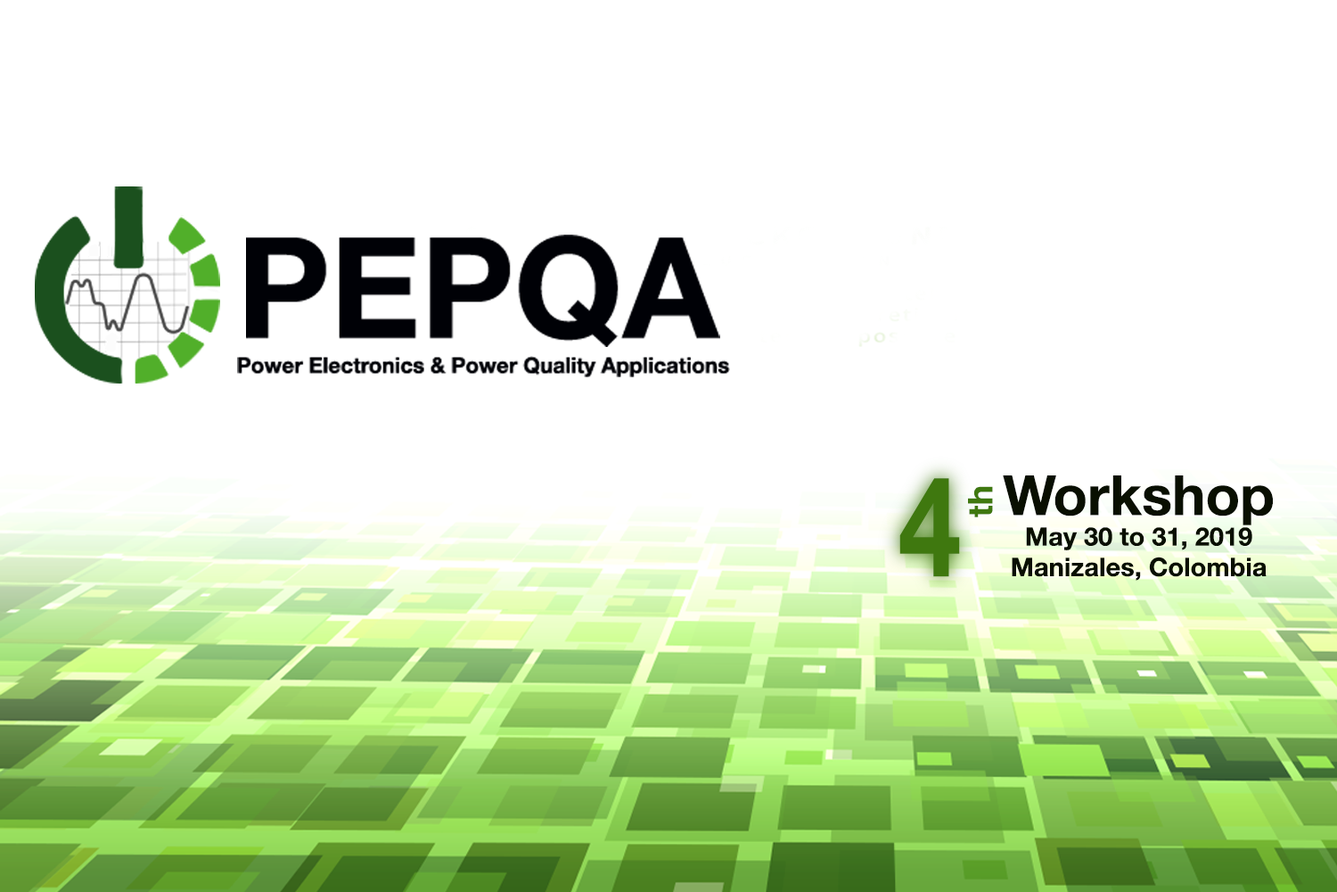
<style>
.page{position:relative;width:1337px;height:892px;background:#ffffff}
.page>*{position:absolute;margin:0}
.t1{font:140.1px "HelveticaNeue-Bold";color:#000106}
.t2{font:21.7px "HelveticaNeue-Bold";color:#000106}
.t3{font:139.8px "HelveticaNeue-Bold";color:#3f780f;scale:0.8 1}
.t4{font:34px "HelveticaNeue-Bold";color:#3f780f}
.t5{font:25.4px "HelveticaNeue-Bold";color:#090f01}
.t6{font:55.4px "HelveticaNeue-Bold";color:#090f01}
</style>
<div class="page">
<p class="t1" style="left:246px;top:234px;width:474px;height:113px">PEPQA</p>
<p class="t2" style="left:237px;top:356px;width:493px;height:21px">Power Electronics &amp; Power Quality Applications</p>
<p class="t3" style="left:900px;top:478px;width:60px;height:99px">4</p>
<p class="t4" style="left:968px;top:486px;width:25px;height:31px;rotate:-90deg">th</p>
<p class="t5" style="left:1003px;top:475px;width:270px;height:105px;text-align:center"><span class="t6">Workshop<br></span>May 30 to 31, 2019<br>Manizales, Colombia</p>
</div>
